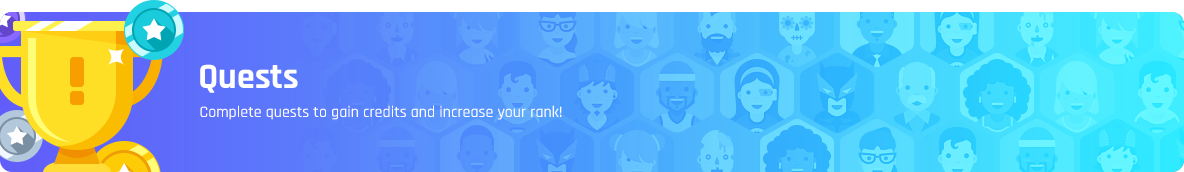
<style>
.page{position:relative;width:1184px;height:172px}
.page>*{position:absolute;margin:0}
.t1{font:36px "Rajdhani-Bold";color:#ffffff}
.t2{font:16px "Rajdhani-Medium";color:#ffffff}
</style>
<div class="page">
<p class="t1" style="left:200px;top:64px;width:98px;height:29px">Quests</p>
<p class="t2" style="left:200px;top:105px;width:362px;height:15px">Complete quests to gain credits and increase your rank!</p>
</div>
